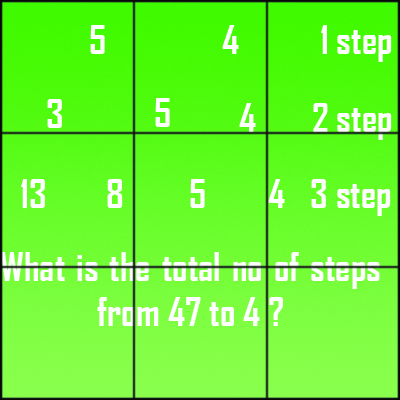
<style>
.page{position:relative;width:400px;height:400px}
.page>*{position:absolute;margin:0}
.t1{font:38px "AgencyFB-Bold";color:#ffffff}
</style>
<div class="page">
<p class="t1" style="left:90px;top:25px;width:15px;height:29px">5</p>
<p class="t1" style="left:222px;top:25px;width:17px;height:29px">4</p>
<p class="t1" style="left:321px;top:25px;width:71px;height:37px">1 step</p>
<p class="t1" style="left:47px;top:99px;width:15px;height:29px">3</p>
<p class="t1" style="left:155px;top:98px;width:15px;height:29px">5</p>
<p class="t1" style="left:239px;top:103px;width:17px;height:29px">4</p>
<p class="t1" style="left:313px;top:103px;width:79px;height:37px">2 step</p>
<p class="t1" style="left:21px;top:179px;width:24px;height:29px">13</p>
<p class="t1" style="left:107px;top:179px;width:16px;height:29px">8</p>
<p class="t1" style="left:190px;top:179px;width:15px;height:29px">5</p>
<p class="t1" style="left:268px;top:179px;width:17px;height:29px">4</p>
<p class="t1" style="left:311px;top:179px;width:80px;height:37px">3 step</p>
<p class="t1" style="left:0px;top:252px;width:380px;height:74px;text-align:justify">What is the total no of steps from 47 to 4 ?</p>
</div>
